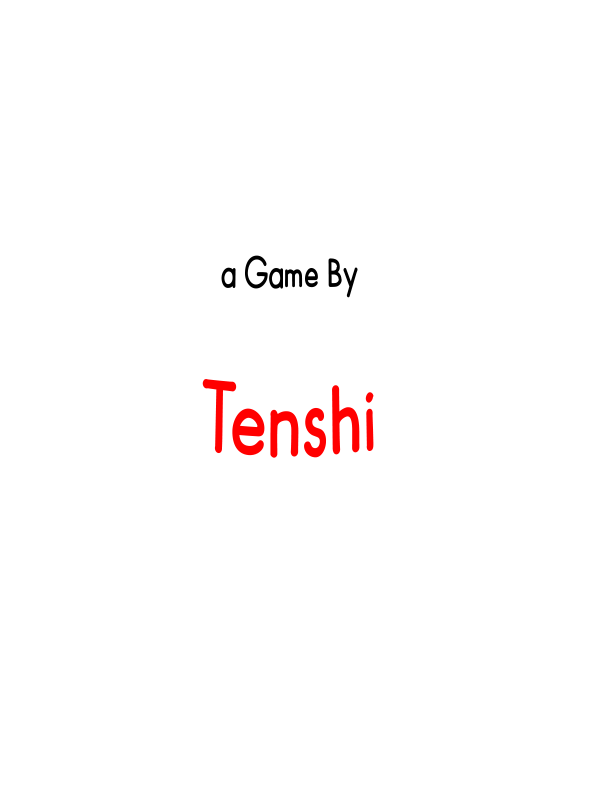
<style>
.page{position:relative;width:600px;height:800px;background:#ffffff}
.page>*{position:absolute;margin:0}
.t1{font:30px "TPBAFK-Regular";color:#000000}
.t2{font:72px "TPBAFK-Regular";color:#ff0000}
</style>
<div class="page">
<p class="t1" style="left:202px;top:255px;width:172px;height:203px;text-align:center">a Game By<br><br><span class="t2">Tenshi</span></p>
</div>
